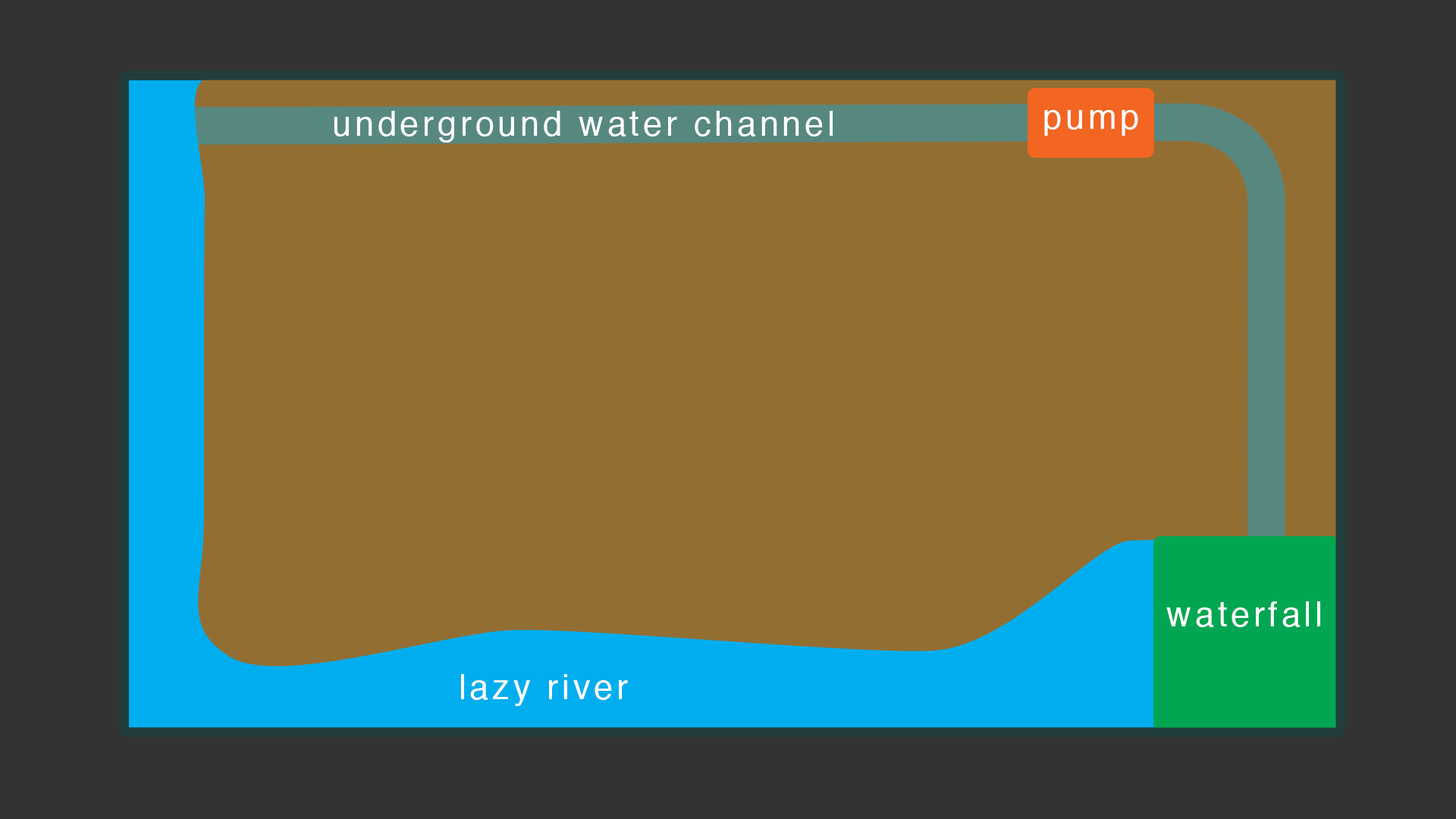
<style>
.page{position:relative;width:1456px;height:819px;background:#936e33}
.page>*{position:absolute;margin:0}
.t1{font:34.2px "Helvetica";letter-spacing:0.105em;color:#ffffff}
</style>
<div class="page">
<p class="t1" style="left:334px;top:111px;width:499px;height:32px">underground water channel</p>
<p class="t1" style="left:1044px;top:110px;width:94px;height:26px">pump</p>
<p class="t1" style="left:1166px;top:601px;width:154px;height:26px">waterfall</p>
<p class="t1" style="left:461px;top:674px;width:167px;height:32px">lazy river</p>
</div>
